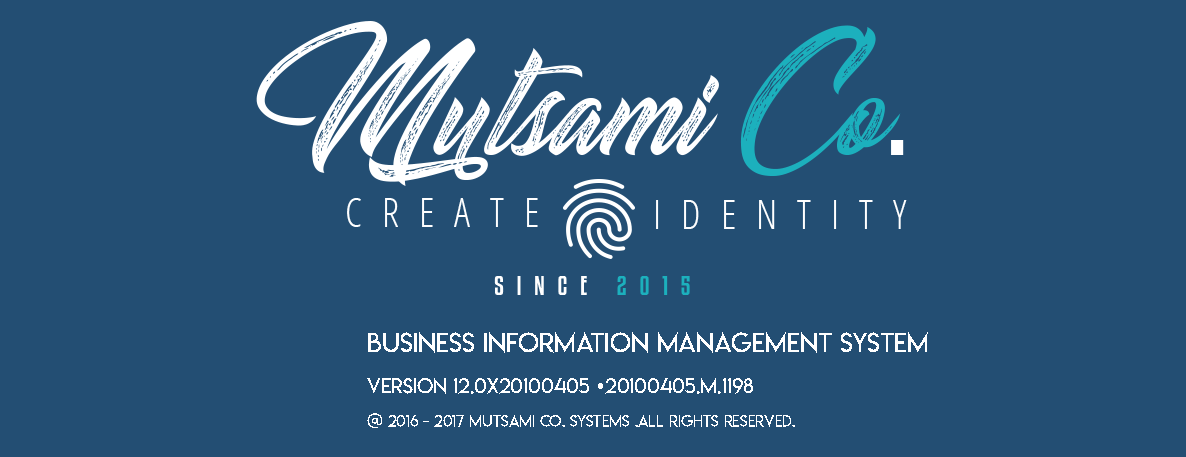
<style>
.page{position:relative;width:1186px;height:457px;background:#234e73}
.page>*{position:absolute;margin:0}
.t1{font:27px "LemonMilklight";color:#ffffff}
.t2{font:21px "LemonMilklight";color:#ffffff}
.t3{font:16px "LemonMilklight";color:#ffffff}
</style>
<div class="page">
<p class="t1" style="left:368px;top:332px;width:560px;height:21px">Business Information Management System</p>
<p class="t2" style="left:367px;top:378px;width:386px;height:16px">Version 12.0x20100405 [20100405.m.1198</p>
<p class="t3" style="left:367px;top:413px;width:428px;height:15px">@ 2016 - 2017 mutsami co. systems .all rights reserved.</p>
</div>
